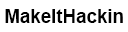
<style>
.page{position:relative;width:128px;height:32px;background:#ffffff}
.page>*{position:absolute;margin:0}
.t1{font:18.8px "Arial-BoldMT";color:#000000}
</style>
<div class="page">
<p class="t1" style="left:5px;top:9px;width:118px;height:14px">MakeItHackin</p>
</div>
